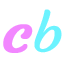
<style>
.page{position:relative;width:64px;height:64px;background:#ffffff}
.page>*{position:absolute;margin:0}
.t1{font:55.1px "Courgette-Regular";color:#f287ff;font-weight:bold;scale:1.16 1}
.t2{font:51.9px "Courgette-Regular";color:#6cf3ff;scale:1.16 1}
</style>
<div class="page">
<p class="t1" style="left:3px;top:9px;width:59px;height:44px">c<span class="t2">b</span></p>
</div>
